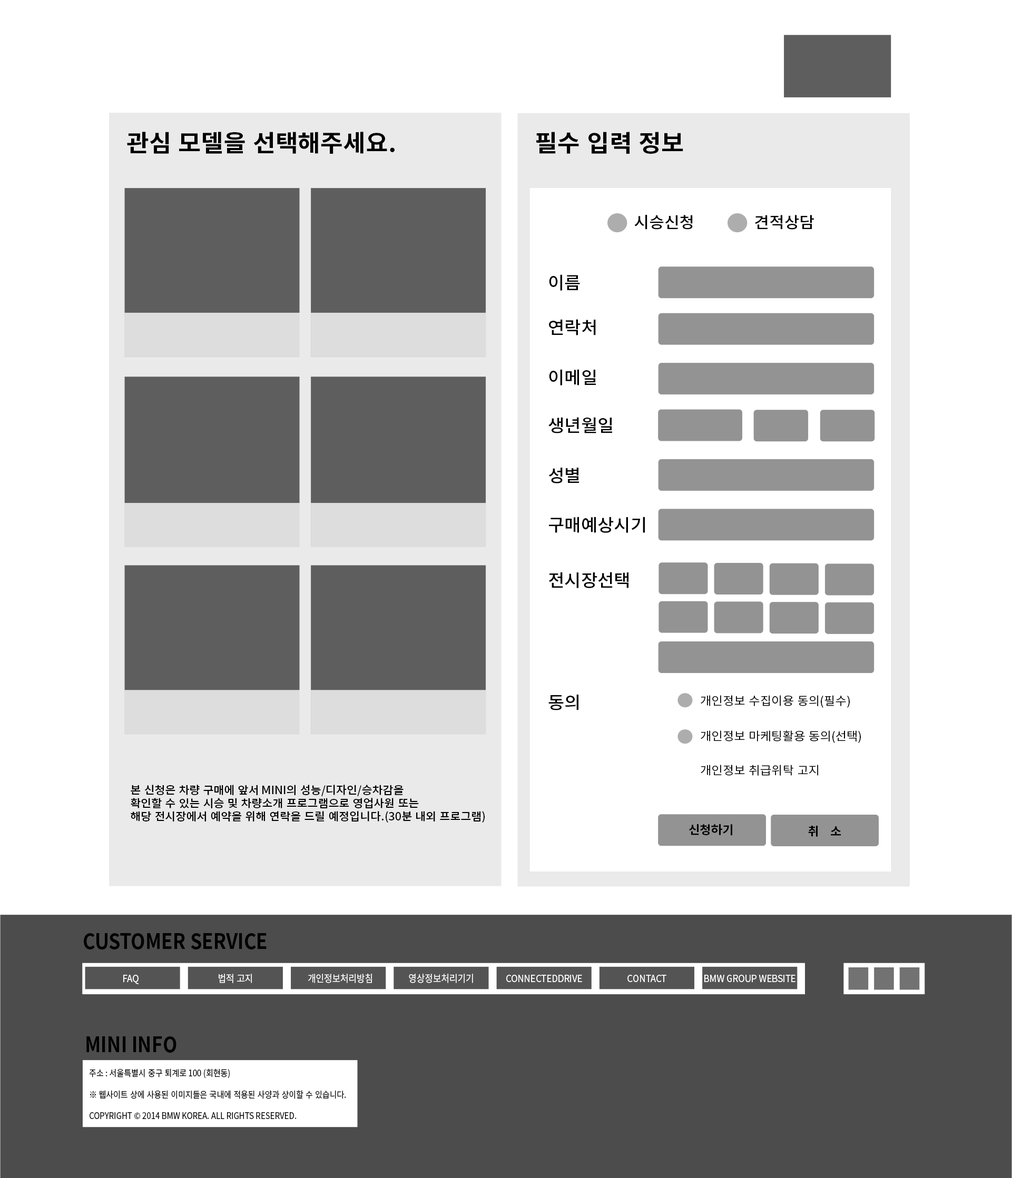
<style>
.page{position:relative;width:1012px;height:1178px;background:#ffffff}
.page>*{position:absolute;margin:0}
.t1{font:23.7px "NotoSansCJKkr-Bold";color:#000000;scale:1.03 1}
.t2{font:15.8px "NotoSansCJKkr-Medium";color:#000000;scale:1.03 1}
.t3{font:17.4px "NotoSansCJKkr-Medium";color:#000000;scale:1.03 1}
.t4{font:11.8px "NotoSansCJKkr-Regular";color:#000000;scale:1.03 1}
.t5{font:11.1px "NotoSansCJKkr-Medium";color:#000000;scale:1.03 1}
.t6{font:11.8px "NotoSansCJKkr-Bold";color:#000000;scale:1.03 1}
.t7{font:21.2px "NotoSansCJKkr-Bold";color:#000000;scale:0.89 1}
.t8{font:10px "NotoSansCJKkr-Regular";color:#ffffff;scale:0.89 1}
.t9{font:8.9px "NotoSansCJKkr-Regular";color:#000000;scale:0.89 1}
</style>
<div class="page">
<p class="t1" style="left:127px;top:132px;width:268px;height:22px">관심 모델을 선택해주세요.</p>
<p class="t1" style="left:536px;top:132px;width:147px;height:22px">필수 입력 정보</p>
<p class="t2" style="left:634px;top:215px;width:59px;height:15px">시승신청</p>
<p class="t2" style="left:755px;top:215px;width:59px;height:15px">견적상담</p>
<p class="t3" style="left:549px;top:274px;width:31px;height:17px">이름</p>
<p class="t3" style="left:549px;top:319px;width:47px;height:17px">연락처</p>
<p class="t3" style="left:549px;top:369px;width:47px;height:17px">이메일</p>
<p class="t3" style="left:548px;top:417px;width:64px;height:17px">생년월일</p>
<p class="t3" style="left:548px;top:468px;width:31px;height:16px">성별</p>
<p class="t3" style="left:549px;top:517px;width:96px;height:16px">구매예상시기</p>
<p class="t3" style="left:549px;top:572px;width:79px;height:16px">전시장선택</p>
<p class="t3" style="left:548px;top:695px;width:30px;height:16px">동의</p>
<p class="t4" style="left:701px;top:695px;width:149px;height:13px">개인정보 수집이용 동의(필수)</p>
<p class="t4" style="left:701px;top:731px;width:160px;height:12px">개인정보 마케팅활용 동의(선택)</p>
<p class="t4" style="left:701px;top:765px;width:117px;height:11px">개인정보 취급위탁 고지</p>
<p class="t5" style="left:131px;top:785px;width:354px;height:38px">본 신청은 차량 구매에 앞서 MINI의 성능/디자인/승차감을 <br>확인할 수 있는 시승 및 차량소개 프로그램으로 영업사원 또는 <br>해당 전시장에서 예약을 위해 연락을 드릴 예정입니다.(30분 내외 프로그램)</p>
<p class="t6" style="left:689px;top:824px;width:43px;height:12px">신청하기</p>
<p class="t6" style="left:808px;top:826px;width:33px;height:11px">취    소</p>
<p class="t7" style="left:84px;top:933px;width:183px;height:17px">CUSTOMER SERVICE</p>
<p class="t8" style="left:123px;top:975px;width:16px;height:10px">FAQ</p>
<p class="t8" style="left:219px;top:974px;width:33px;height:9px">법적 고지</p>
<p class="t8" style="left:308px;top:973px;width:64px;height:10px">개인정보처리방침</p>
<p class="t8" style="left:409px;top:974px;width:64px;height:9px">영상정보처리기기</p>
<p class="t8" style="left:506px;top:975px;width:76px;height:7px">CONNECTEDDRIVE</p>
<p class="t8" style="left:627px;top:975px;width:39px;height:7px">CONTACT</p>
<p class="t8" style="left:704px;top:975px;width:91px;height:7px">BMW GROUP WEBSITE</p>
<p class="t7" style="left:86px;top:1037px;width:90px;height:16px">MINI INFO</p>
<p class="t9" style="left:89px;top:1069px;width:257px;height:50px">주소 : 서울특별시 중구 퇴계로 100 (회현동)<br><br>※ 웹사이트 상에 사용된 이미지들은 국내에 적용된 사양과 상이할 수 있습니다.<br><br>COPYRIGHT © 2014 BMW KOREA. ALL RIGHTS RESERVED.</p>
</div>
